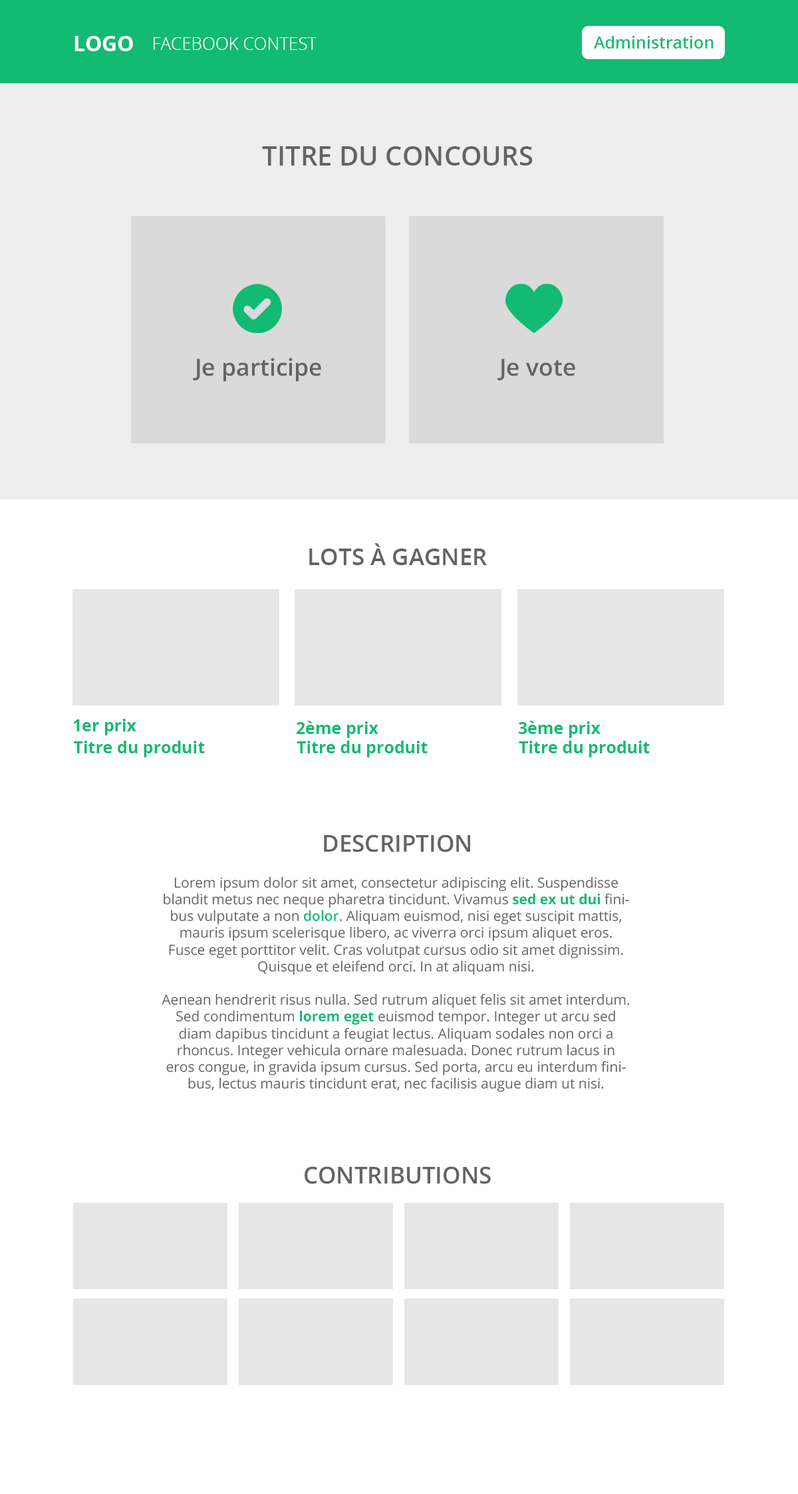
<style>
.page{position:relative;width:798px;height:1494px;background:#ffffff}
.page>*{position:absolute;margin:0}
.t1{font:21.3px "OpenSans-Bold";color:#ffffff}
.t2{font:17.3px "OpenSans-Light";color:#ffffff;text-transform:uppercase}
.t3{font:16.6px "OpenSans-Semibold";color:#12ba74}
.t4{font:26.6px "OpenSans-Semibold";color:#646464;text-transform:uppercase}
.t5{font:23.6px "OpenSans-Semibold";color:#646464}
.t6{font:23.3px "OpenSans-Semibold";color:#646464;text-transform:uppercase}
.t7{font:16.6px "OpenSans-Bold";color:#12ba74}
.t8{font:14px "OpenSans";color:#646464}
.t9{font:14px "OpenSans-Bold";color:#12ba74}
.t10{font:14px "OpenSans-Semibold";color:#12ba74}
</style>
<div class="page">
<p class="t1" style="left:74px;top:36px;width:59px;height:15px">LOGO</p>
<p class="t2" style="left:154px;top:37px;width:163px;height:13px">Facebook contest</p>
<p class="t3" style="left:594px;top:36px;width:120px;height:13px">Administration</p>
<p class="t4" style="left:262px;top:146px;width:271px;height:20px">Titre du concours</p>
<p class="t5" style="left:193px;top:358px;width:128px;height:24px">Je participe</p>
<p class="t5" style="left:497px;top:358px;width:78px;height:22px">Je vote</p>
<p class="t6" style="left:309px;top:543px;width:178px;height:22px">Lots à gagner</p>
<p class="t7" style="left:73px;top:719px;width:63px;height:16px">1er prix</p>
<p class="t7" style="left:297px;top:721px;width:81px;height:17px">2ème prix</p>
<p class="t7" style="left:519px;top:721px;width:81px;height:17px">3ème prix</p>
<p class="t7" style="left:74px;top:741px;width:131px;height:16px">Titre du produit</p>
<p class="t7" style="left:297px;top:741px;width:131px;height:16px">Titre du produit</p>
<p class="t7" style="left:519px;top:741px;width:131px;height:16px">Titre du produit</p>
<p class="t6" style="left:324px;top:835px;width:146px;height:18px">Description</p>
<p class="t8" style="left:162px;top:876px;width:467px;height:217px;text-align:center">Lorem ipsum dolor sit amet, consectetur adipiscing elit. Suspendisse blandit metus nec neque pharetra tincidunt. Vivamus <span class="t9">sed ex ut dui</span> finibus vulputate a non <span class="t10">dolor</span>. Aliquam euismod, nisi eget suscipit mattis, mauris ipsum scelerisque libero, ac viverra orci ipsum aliquet eros. Fusce eget porttitor velit. Cras volutpat cursus odio sit amet dignissim. Quisque et eleifend orci. In at aliquam nisi.<br><br>Aenean hendrerit risus nulla. Sed rutrum aliquet felis sit amet interdum. Sed condimentum <span class="t9">lorem eget</span> euismod tempor. Integer ut arcu sed diam dapibus tincidunt a feugiat lectus. Aliquam sodales non orci a rhoncus. Integer vehicula ornare malesuada. Donec rutrum lacus in eros congue, in gravida ipsum cursus. Sed porta, arcu eu interdum finibus, lectus mauris tincidunt erat, nec facilisis augue diam ut nisi.</p>
<p class="t6" style="left:305px;top:1166px;width:186px;height:18px">Contributions</p>
</div>
